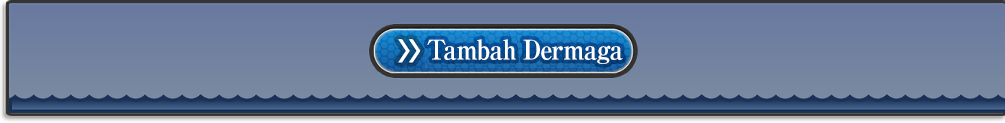
<style>
.page{position:relative;width:1005px;height:123px}
.page>*{position:absolute;margin:0}
.t1{font:27px "RyuminPro-ExBold";letter-spacing:-0.04em;color:#ffffff;scale:0.9 1}
</style>
<div class="page">
<p class="t1" style="left:427px;top:39px;width:196px;height:25px">Tambah Dermaga</p>
</div>
